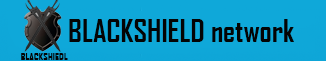
<style>
.page{position:relative;width:326px;height:61px;background:#0fa8d9}
.page>*{position:absolute;margin:0}
.t1{font:30px "AgencyFB-Bold";color:#040404}
.t2{font:9px "AgencyFB-Bold";color:#040404;scale:1.15 1}
</style>
<div class="page">
<p class="t1" style="left:69px;top:19px;width:225px;height:23px">BLACKSHIELD network</p>
<p class="t2" style="left:21px;top:53px;width:47px;height:7px">BLACKSHIEDL</p>
</div>
